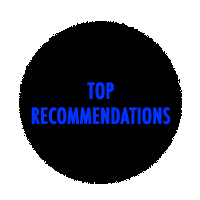
<style>
.page{position:relative;width:200px;height:200px;background:#ffffff}
.page>*{position:absolute;margin:0}
.t1{font:20.8px "Futura-CondensedMedium";color:#0033ff;text-transform:uppercase;font-weight:bold}
</style>
<div class="page">
<p class="t1" style="left:31px;top:82px;width:140px;height:43px;text-align:center">top <br>recommendations</p>
</div>
